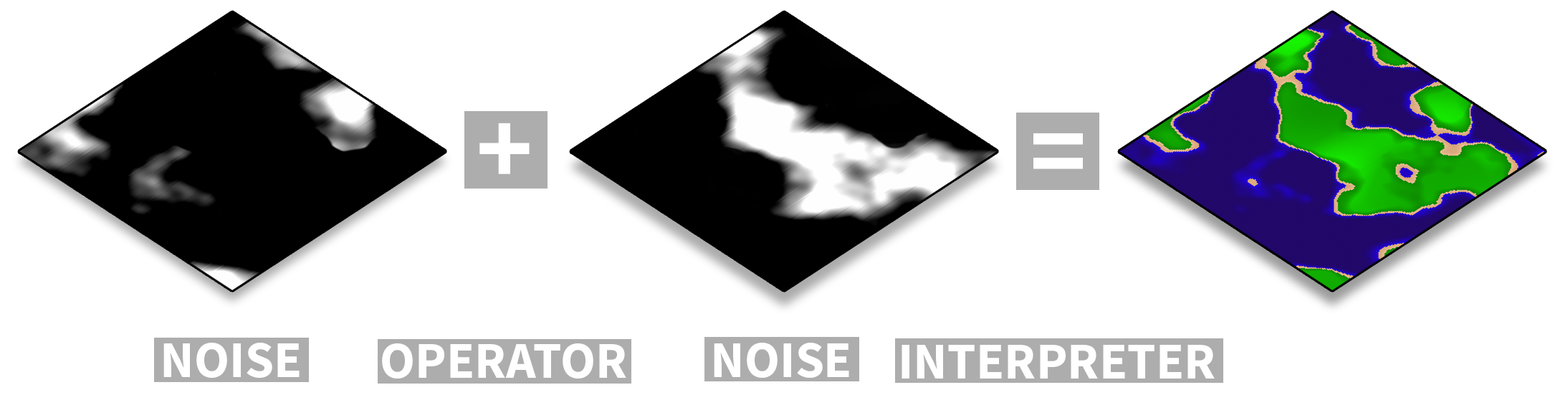
<style>
.page{position:relative;width:1568px;height:395px;background:#ffffff}
.page>*{position:absolute;margin:0}
.t1{font:107.5px "SourceSansPro-Bold";color:#ffffff}
.t2{font:51.6px "SourceSansPro-Bold";color:#ffffff}
</style>
<div class="page">
<p class="t1" style="left:479px;top:123px;width:51px;height:51px">+</p>
<p class="t1" style="left:1033px;top:133px;width:50px;height:36px">=</p>
<p class="t2" style="left:163px;top:343px;width:137px;height:35px">NOISE</p>
<p class="t2" style="left:382px;top:343px;width:244px;height:35px">OPERATOR</p>
<p class="t2" style="left:714px;top:343px;width:135px;height:35px">NOISE</p>
<p class="t2" style="left:902px;top:345px;width:313px;height:33px">INTERPRETER</p>
</div>
